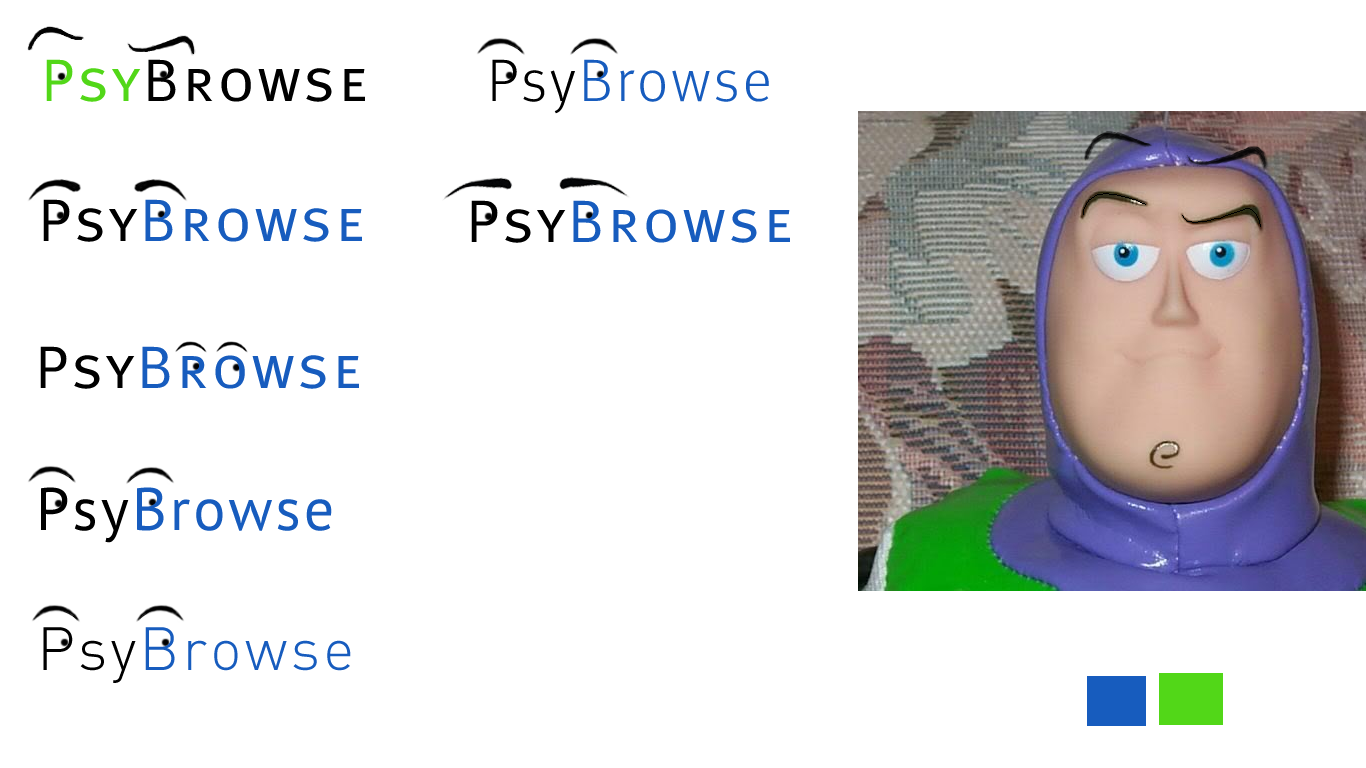
<style>
.page{position:relative;width:1366px;height:768px;background:#ffffff}
.page>*{position:absolute;margin:0}
.t1{font:60px "MetaScOffc-Norm";letter-spacing:0.05em;color:#000000}
.t2{font:60px "MetaScOffc-Norm";letter-spacing:0.05em;color:#52d718}
.t3{font:60px "MetaOffc-Light";letter-spacing:0.05em;color:#175cbe}
.t4{font:60px "MetaOffc-Light";letter-spacing:0.05em;color:#000000}
.t5{font:60px "MetaScOffc-Norm";letter-spacing:0.05em;color:#175cbe}
.t6{font:60px "PTSans-Regular";letter-spacing:0.05em;color:#175cbe}
.t7{font:60px "PTSans-Regular";letter-spacing:0.05em;color:#000000}
.t8{font:60px "DIN-Light";letter-spacing:0.05em;color:#175cbe}
.t9{font:60px "DIN-Light";letter-spacing:0.05em;color:#000000}
</style>
<div class="page">
<p class="t1" style="left:46px;top:59px;width:319px;height:43px"><span class="t2">Psy</span>Browse</p>
<p class="t3" style="left:492px;top:59px;width:277px;height:55px"><span class="t4">Psy</span>Browse</p>
<p class="t5" style="left:43px;top:199px;width:319px;height:43px"><span class="t1">Psy</span>Browse</p>
<p class="t5" style="left:471px;top:200px;width:319px;height:43px"><span class="t1">Psy</span>Browse</p>
<p class="t5" style="left:40px;top:346px;width:319px;height:43px"><span class="t1">Psy</span>Browse</p>
<p class="t6" style="left:41px;top:487px;width:291px;height:56px"><span class="t7">Psy</span>Browse</p>
<p class="t8" style="left:43px;top:627px;width:308px;height:56px"><span class="t9">Psy</span>Browse</p>
</div>
